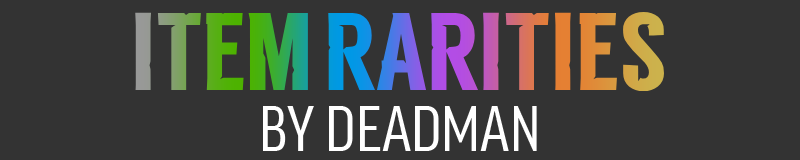
<style>
.page{position:relative;width:800px;height:160px;background:#333333}
.page>*{position:absolute;margin:0}
.t1{font:110px "TLD_Headline_One_Test1.5"}
.t2{font:62px "FFGoodProCond-News";color:#ffffff}
</style>
<div class="page">
<p class="t1" style="left:135px;top:12px;width:529px;height:80px">ITEM RARITIES</p>
<p class="t2" style="left:263px;top:106px;width:274px;height:45px">BY DEADMAN</p>
</div>
